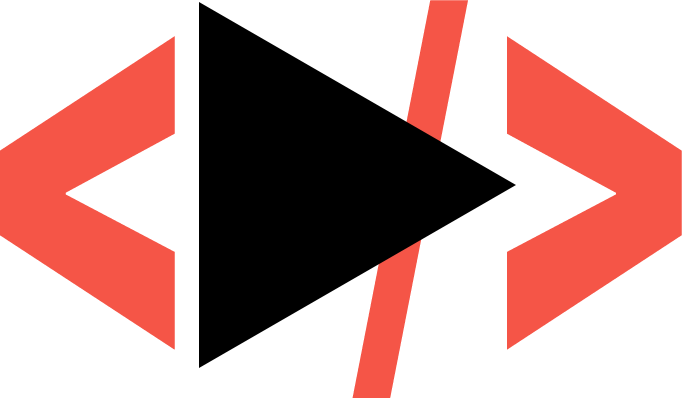
<style>
.page{position:relative;width:682px;height:398px;background:#ffffff}
.page>*{position:absolute;margin:0}
.t1{font:650px "Roboto-Black";letter-spacing:0.047em;color:#f55547;scale:0.62 1}
.t2{font:514.7px "Roboto-Black";letter-spacing:0.047em;color:#f55547;scale:0.62 1}
</style>
<div class="page">
<p class="t1" style="left:0px;top:0px;width:682px;height:398px">&lt; <span class="t2">/</span>&gt;</p>
</div>
